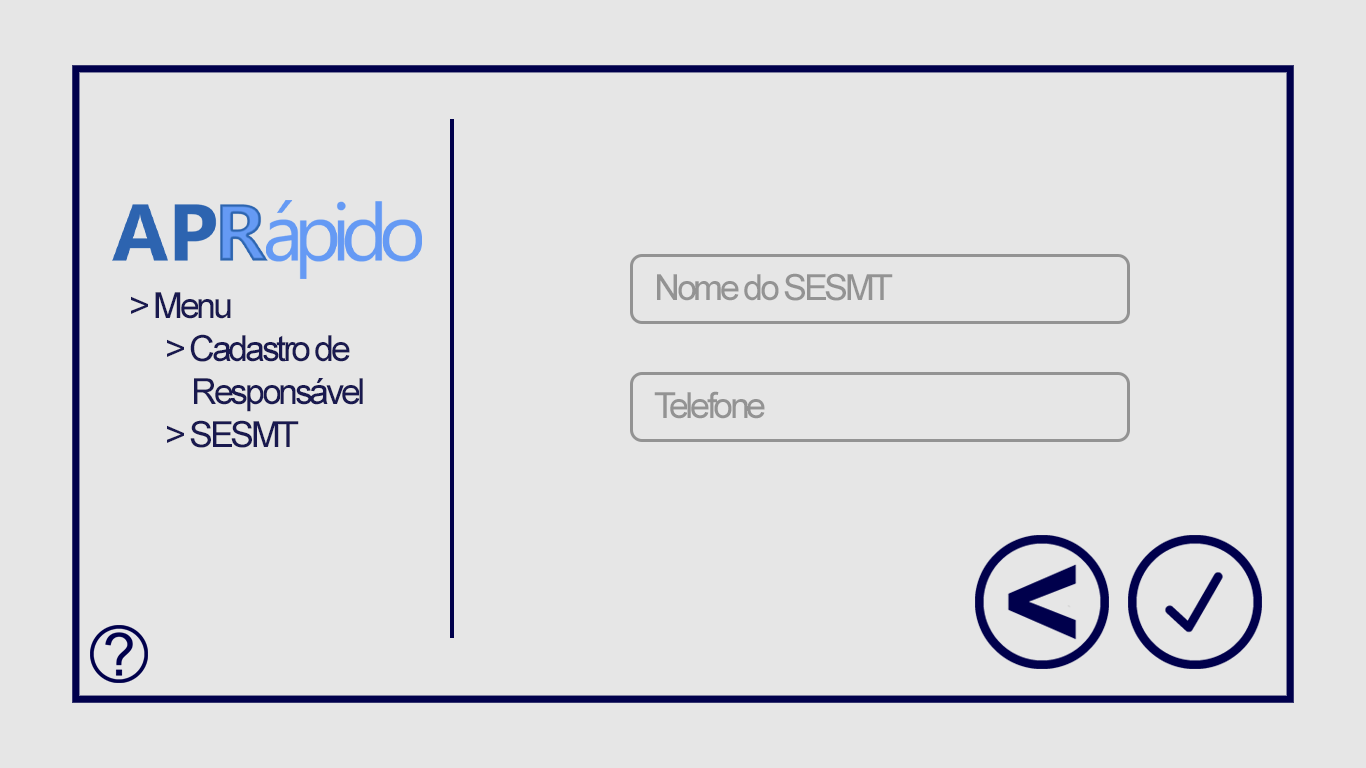
<style>
.page{position:relative;width:1366px;height:768px;background:#e6e6e6}
.page>*{position:absolute;margin:0}
.t1{font:36px "ArialMT";letter-spacing:-0.095em;color:#939393}
.t2{font:36px "ArialMT";letter-spacing:-0.095em;color:#19194f}
</style>
<div class="page">
<p class="t1" style="left:657px;top:273px;width:236px;height:28px">Nome do SESMT</p>
<p class="t2" style="left:131px;top:292px;width:232px;height:156px">&gt; Menu<br> &gt; Cadastro de <br>     Responsável<br> &gt; SESMT</p>
<p class="t1" style="left:654px;top:391px;width:111px;height:28px">Telefone</p>
</div>
